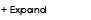
<style>
.page{position:relative;width:91px;height:20px;background:#ffffff}
.page>*{position:absolute;margin:0}
.t1{font:10px "CenturyGothic";color:#000000}
</style>
<div class="page">
<p class="t1" style="left:1px;top:6px;width:45px;height:9px">+ Expand</p>
</div>
